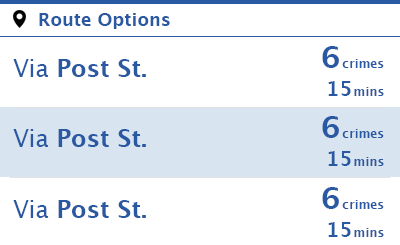
<style>
.page{position:relative;width:400px;height:245px;background:#ffffff}
.page>*{position:absolute;margin:0}
.t1{font:18px "LucidaGrande-Bold";color:#2859a2}
.t2{font:12px "LucidaGrande-Bold";color:#2859a2}
.t3{font:30px "LucidaGrande-Bold";letter-spacing:0.05em;color:#2859a2}
.t4{font:12px "LucidaGrande-Bold";letter-spacing:0.05em;color:#2859a2}
.t5{font:24px "LucidaGrande-Bold";color:#2859a2}
.t6{font:24px "LucidaGrande";color:#2859a2}
.t7{font:20px "LucidaGrande-Bold";color:#2859a2}
.t8{font:20px "LucidaGrande-Bold";letter-spacing:0.05em;color:#2859a2}
</style>
<div class="page">
<p class="t1" style="left:39px;top:13px;width:131px;height:16px">Route Options</p>
<p class="t2" style="left:322px;top:46px;width:62px;height:22px"><span class="t3">6</span><span class="t4">c</span>rimes</p>
<p class="t5" style="left:13px;top:59px;width:133px;height:18px"><span class="t6">Via </span>Post St.</p>
<p class="t2" style="left:328px;top:81px;width:56px;height:15px"><span class="t7">1</span><span class="t8">5</span><span class="t4">m</span>ins</p>
<p class="t2" style="left:322px;top:116px;width:62px;height:22px"><span class="t3">6</span><span class="t4">c</span>rimes</p>
<p class="t5" style="left:13px;top:129px;width:133px;height:18px"><span class="t6">Via </span>Post St.</p>
<p class="t2" style="left:328px;top:151px;width:56px;height:15px"><span class="t7">1</span><span class="t8">5</span><span class="t4">m</span>ins</p>
<p class="t2" style="left:322px;top:187px;width:62px;height:22px"><span class="t3">6</span><span class="t4">c</span>rimes</p>
<p class="t5" style="left:13px;top:200px;width:133px;height:18px"><span class="t6">Via </span>Post St.</p>
<p class="t2" style="left:328px;top:222px;width:56px;height:15px"><span class="t7">1</span><span class="t8">5</span><span class="t4">m</span>ins</p>
</div>
